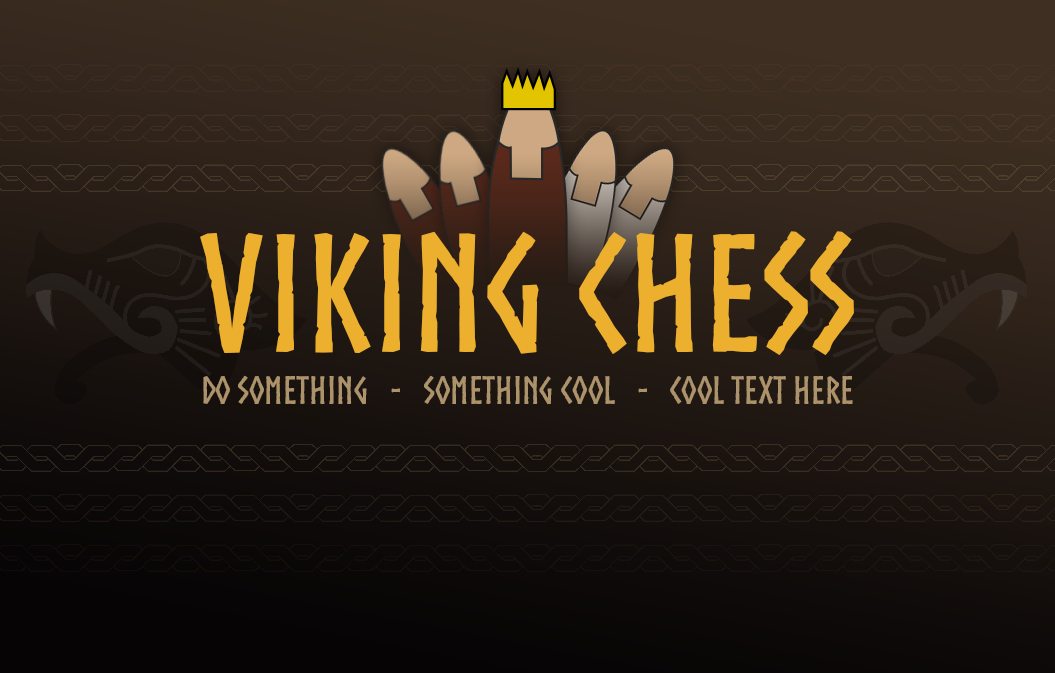
<style>
.page{position:relative;width:1055px;height:673px}
.page>*{position:absolute;margin:0}
.t1{font:160px "Norse-Bold";color:#ecb02e}
.t2{font:37.5px "Norse-Bold";color:#ac936b}
</style>
<div class="page">
<p class="t1" style="left:200px;top:231px;width:654px;height:124px">Viking Chess</p>
<p class="t2" style="left:203px;top:375px;width:650px;height:30px">Do something   -   Something cool   -   Cool text here</p>
</div>
